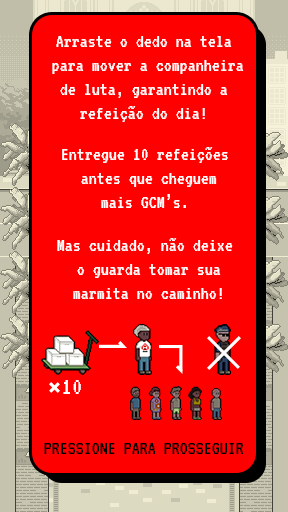
<style>
.page{position:relative;width:288px;height:512px;background:#ff0000}
.page>*{position:absolute;margin:0}
.t1{font:20px "VT323-Regular";color:#ffffff}
.t2{font:25.2px "VT323-Regular";color:#ffffff;scale:1.04 1}
.t3{font:20px "VT323-Regular";color:#000000}
</style>
<div class="page">
<p class="t1" style="left:52px;top:36px;width:192px;height:86px;text-align:center">Arraste o dedo na tela<br> para mover a companheira<br> de luta, garantindo a <br>refeição do dia!</p>
<p class="t1" style="left:62px;top:147px;width:166px;height:61px;text-align:center">Entregue 10 refeições<br> antes que cheguem<br> mais GCM’s.</p>
<p class="t1" style="left:57px;top:238px;width:176px;height:61px;text-align:center">Mas cuidado, não deixe<br> o guarda tomar sua<br> marmita no caminho!</p>
<p class="t2" style="left:63px;top:380px;width:18px;height:14px">10</p>
<p class="t3" style="left:44px;top:443px;width:200px;height:11px">PRESSIONE PARA PROSSEGUIR</p>
</div>
